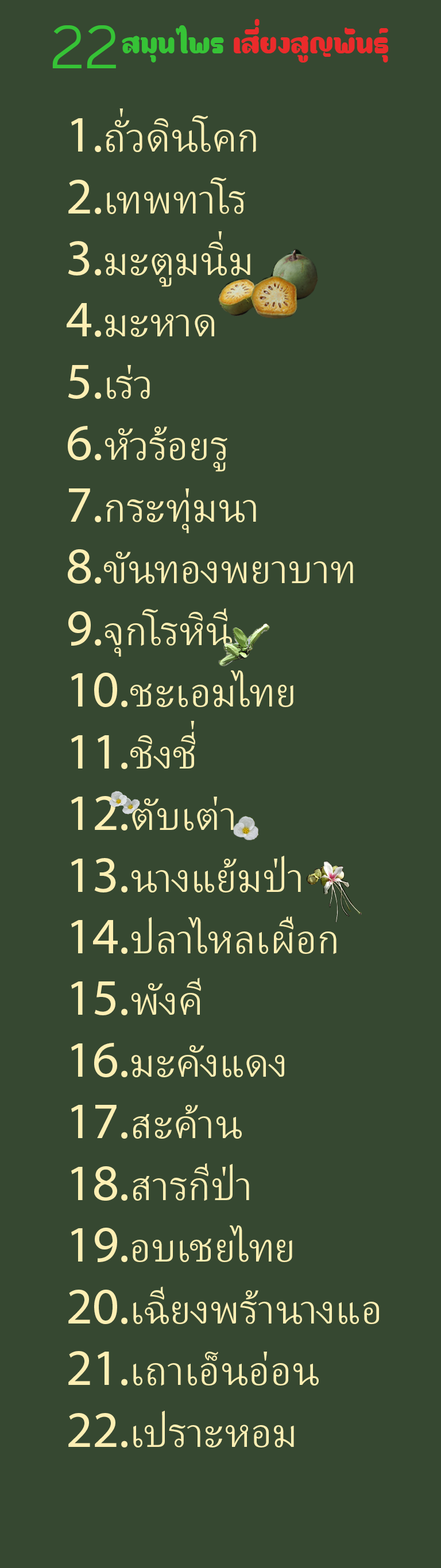
<style>
.page{position:relative;width:441px;height:1568px;background:#364831}
.page>*{position:absolute;margin:0}
.t1{font:88.4px "THBaijam";color:#36c336}
.t2{font:41.3px "ATKThaisong-Regular";color:#eb2b2b}
.t3{font:41.3px "ATKThaisong-Regular";color:#36c336}
.t4{font:51.4px "AdobeThai-Regular";color:#feefb4}
.t5{font:51.4px "MyriadPro-Regular";color:#feefb4}
</style>
<div class="page">
<p class="t1" style="left:52px;top:25px;width:64px;height:43px">22</p>
<p class="t2" style="left:122px;top:19px;width:267px;height:44px"><span class="t3">สมุนไพร </span>เสี่ยงสูญพันธุ์</p>
<p class="t4" style="left:67px;top:108px;width:312px;height:1339px"><span class="t5">1.</span>ถั่วดินโคก<span class="t5"> <br>2.</span>เทพทาโร<span class="t5"> <br>3.</span>มะตูมนิ่ม<span class="t5"> <br>4.</span>มะหาด<span class="t5"> <br>5.</span>เร่ว<span class="t5"> <br>6.</span>หัวร้อยรู<span class="t5"> <br>7.</span>กระทุ่มนา<span class="t5"> <br>8.</span>ขันทองพยาบาท<span class="t5"> <br>9.</span>จุกโรหินี<span class="t5"> <br>10.</span>ชะเอมไทย<span class="t5"> <br>11.</span>ชิงชี่<br><span class="t5">12.</span>ตับเต่า<span class="t5"><br>13.</span>นางแย้มป่า<span class="t5"><br>14.</span>ปลาไหลเผือก<span class="t5"><br>15.</span>พังคี<span class="t5"><br>16.</span>มะคังแดง<span class="t5"><br>17.</span>สะค้าน<span class="t5"><br>18.</span>สารกีป่า<span class="t5"><br>19.</span>อบเชยไทย<span class="t5"><br>20.</span>เฉียงพร้านางแอ<span class="t5"><br>21.</span>เถาเอ็นอ่อน<span class="t5"><br>22.</span>เปราะหอม</p>
</div>
